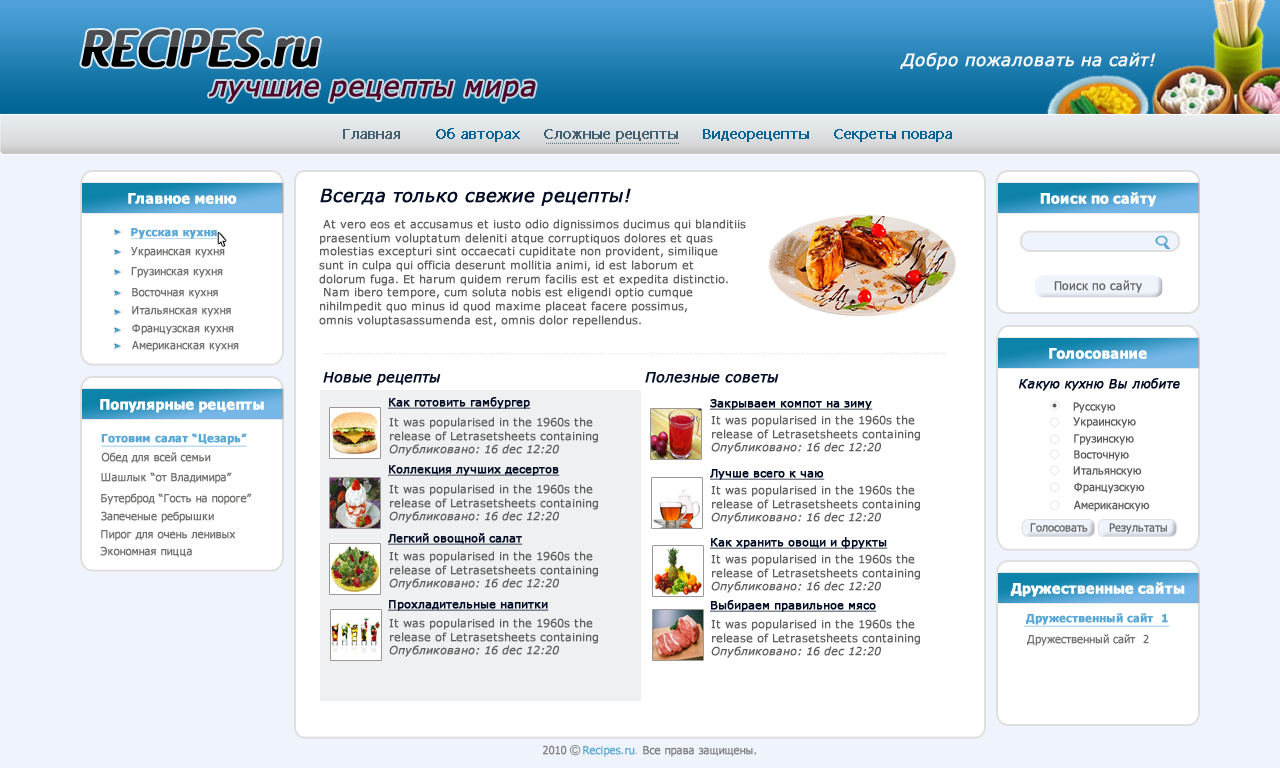
<style>
.page{position:relative;width:1280px;height:768px;background:#ffffff}
.page>*{position:absolute;margin:0}
.t1{font:17px "Verdana-Italic";color:#fafafa;font-weight:bold}
.t2{font:14px "Tahoma";color:#42606e;font-weight:bold}
.t3{font:14px "Tahoma";color:#006393;font-weight:bold}
.t4{font:14px "Tahoma-Bold";color:#ffffff;font-weight:bold}
.t5{font:18px "Verdana-Italic";color:#020c24;font-weight:bold}
.t6{font:11px/13.7px "Verdana";color:#5f5f5f;font-weight:bold}
.t7{font:11px "Tahoma-Bold";color:#58a7d5;font-weight:bold}
.t8{font:11px "Tahoma";color:#717270;font-weight:bold}
.t9{font:12px "Tahoma";color:#686868;font-weight:bold}
.t10{font:14px "Verdana-Italic";color:#020c24;font-weight:bold}
.t11{font:12px "Verdana-Italic";color:#020c24;font-weight:bold}
.t12{font:11px "Verdana";color:#020c24;font-weight:bold;text-decoration:underline}
.t13{font:11px "Tahoma";color:#5f5f5f;font-weight:bold}
.t14{font:11px/13.7px "Verdana-Italic";color:#5f5f5f;font-weight:bold}
.t15{font:11px "Tahoma";color:#686868;font-weight:bold}
.t16{font:11px "Tahoma";color:#7f7f7f;font-weight:bold}
.t17{font:11px "Tahoma";color:#58a7d5;font-weight:bold}
.t18{font:11px "Tahoma";color:#bbbdc2;font-weight:bold}
</style>
<div class="page">
<p class="t1" style="left:900px;top:52px;width:256px;height:18px">Добро пожаловать на сайт!</p>
<p class="t2" style="left:343px;top:129px;width:57px;height:10px">Главная</p>
<p class="t3" style="left:436px;top:128px;width:84px;height:14px">Об авторах</p>
<p class="t2" style="left:544px;top:129px;width:134px;height:13px">Сложные рецепты</p>
<p class="t3" style="left:703px;top:129px;width:106px;height:13px">Видеорецепты</p>
<p class="t3" style="left:834px;top:129px;width:118px;height:13px">Секреты повара</p>
<p class="t4" style="left:128px;top:193px;width:109px;height:11px">Главное меню</p>
<p class="t5" style="left:320px;top:188px;width:311px;height:18px">Всегда только свежие рецепты!</p>
<p class="t4" style="left:1040px;top:192px;width:117px;height:15px">Поиск по сайту</p>
<p class="t6" style="left:319px;top:219px;width:427px;height:108px">At vero eos et accusamus et iusto odio dignissimos ducimus qui blanditiis <br>praesentium voluptatum deleniti atque corruptiquos dolores et quas <br>molestias excepturi sint occaecati cupiditate non provident, similique <br>sunt in culpa qui officia deserunt mollitia animi, id est laborum et <br>dolorum fuga. Et harum quidem rerum facilis est et expedita distinctio.<br> Nam ibero tempore, cum soluta nobis est eligendi optio cumque <br>nihilmpedit quo minus id quod maxime placeat facere possimus, <br>omnis voluptasassumenda est, omnis dolor repellendus.</p>
<p class="t7" style="left:131px;top:228px;width:86px;height:11px">Русская кухня</p>
<p class="t8" style="left:131px;top:247px;width:94px;height:11px">Украинская кухня</p>
<p class="t8" style="left:131px;top:267px;width:92px;height:11px">Грузинская кухня</p>
<p class="t9" style="left:1054px;top:280px;width:88px;height:13px">Поиск по сайту</p>
<p class="t8" style="left:132px;top:288px;width:86px;height:11px">Восточная кухня</p>
<p class="t8" style="left:132px;top:306px;width:99px;height:11px">Итальянская кухня</p>
<p class="t8" style="left:132px;top:324px;width:102px;height:11px">Французская кухня</p>
<p class="t8" style="left:132px;top:341px;width:107px;height:11px">Американская кухня</p>
<p class="t4" style="left:1049px;top:348px;width:98px;height:11px">Голосование</p>
<p class="t10" style="left:323px;top:372px;width:118px;height:14px">Новые рецепты</p>
<p class="t10" style="left:645px;top:372px;width:134px;height:11px">Полезные советы</p>
<p class="t11" style="left:1019px;top:378px;width:161px;height:13px">Какую кухню Вы любите</p>
<p class="t4" style="left:100px;top:399px;width:164px;height:14px">Популярные рецепты</p>
<p class="t12" style="left:388px;top:397px;width:143px;height:12px">Как готовить гамбургер</p>
<p class="t12" style="left:710px;top:399px;width:163px;height:11px">Закрываем компот на зиму</p>
<p class="t13" style="left:1073px;top:402px;width:43px;height:11px">Русскую</p>
<p class="t6" style="left:389px;top:417px;width:209px;height:39px">It was popularised in the 1960s the <br>release of Letrasetsheets containing <br><span class="t14">Опубликовано: 16 dec 12:20</span></p>
<p class="t6" style="left:711px;top:415px;width:209px;height:39px">It was popularised in the 1960s the <br>release of Letrasetsheets containing <br><span class="t14">Опубликовано: 16 dec 12:20</span></p>
<p class="t13" style="left:1073px;top:417px;width:63px;height:11px">Украинскую</p>
<p class="t7" style="left:101px;top:433px;width:146px;height:12px">Готовим салат “Цезарь”</p>
<p class="t13" style="left:1074px;top:434px;width:60px;height:11px">Грузинскую</p>
<p class="t8" style="left:101px;top:452px;width:110px;height:11px">Обед для всей семьи</p>
<p class="t13" style="left:1074px;top:450px;width:55px;height:11px">Восточную</p>
<p class="t8" style="left:101px;top:472px;width:131px;height:12px">Шашлык “от Владимира”</p>
<p class="t12" style="left:388px;top:465px;width:172px;height:11px">Коллекция лучших десертов</p>
<p class="t12" style="left:710px;top:469px;width:115px;height:11px">Лучше всего к чаю</p>
<p class="t13" style="left:1073px;top:466px;width:69px;height:11px">Итальянскую</p>
<p class="t6" style="left:389px;top:484px;width:209px;height:39px">It was popularised in the 1960s the <br>release of Letrasetsheets containing <br><span class="t14">Опубликовано: 16 dec 12:20</span></p>
<p class="t6" style="left:711px;top:485px;width:209px;height:39px">It was popularised in the 1960s the <br>release of Letrasetsheets containing <br><span class="t14">Опубликовано: 16 dec 12:20</span></p>
<p class="t13" style="left:1074px;top:482px;width:71px;height:12px">Французскую</p>
<p class="t8" style="left:101px;top:493px;width:151px;height:12px">Бутерброд “Гость на пороге”</p>
<p class="t13" style="left:1073px;top:500px;width:77px;height:12px">Американскую</p>
<p class="t8" style="left:101px;top:511px;width:113px;height:12px">Запеченые ребрышки</p>
<p class="t8" style="left:101px;top:530px;width:135px;height:11px">Пирог для очень ленивых</p>
<p class="t12" style="left:388px;top:533px;width:135px;height:12px">Легкий овощной салат</p>
<p class="t15" style="left:1030px;top:523px;width:58px;height:9px">Голосовать</p>
<p class="t15" style="left:1109px;top:523px;width:58px;height:11px">Результаты</p>
<p class="t12" style="left:710px;top:537px;width:178px;height:12px">Как хранить овощи и фрукты</p>
<p class="t8" style="left:100px;top:546px;width:92px;height:11px">Экономная пицца</p>
<p class="t6" style="left:389px;top:551px;width:209px;height:39px">It was popularised in the 1960s the <br>release of Letrasetsheets containing <br><span class="t14">Опубликовано: 16 dec 12:20</span></p>
<p class="t6" style="left:711px;top:554px;width:209px;height:39px">It was popularised in the 1960s the <br>release of Letrasetsheets containing <br><span class="t14">Опубликовано: 16 dec 12:20</span></p>
<p class="t4" style="left:1010px;top:582px;width:175px;height:15px">Дружественные сайты</p>
<p class="t12" style="left:388px;top:600px;width:161px;height:11px">Прохладительные напитки</p>
<p class="t12" style="left:710px;top:600px;width:167px;height:12px">Выбираем правильное мясо</p>
<p class="t7" style="left:1026px;top:613px;width:142px;height:12px">Дружественный сайт  1</p>
<p class="t6" style="left:389px;top:618px;width:209px;height:39px">It was popularised in the 1960s the <br>release of Letrasetsheets containing <br><span class="t14">Опубликовано: 16 dec 12:20</span></p>
<p class="t6" style="left:711px;top:619px;width:209px;height:39px">It was popularised in the 1960s the <br>release of Letrasetsheets containing <br><span class="t14">Опубликовано: 16 dec 12:20</span></p>
<p class="t8" style="left:1027px;top:634px;width:122px;height:12px">Дружественный сайт  2</p>
<p class="t16" style="left:543px;top:745px;width:213px;height:12px">2010    <span class="t17">Recipes.ru</span><span class="t18">. </span>Все права защищены.</p>
</div>
